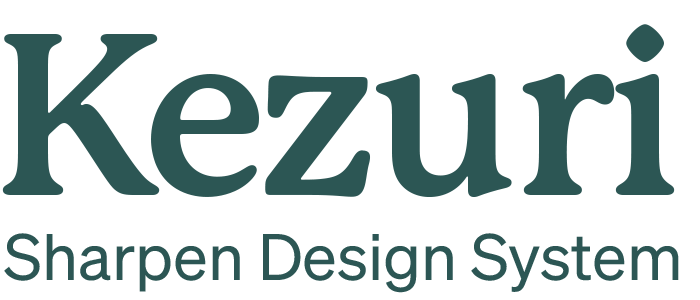
<style>
.page{position:relative;width:700px;height:300px;background:#ffffff}
.page>*{position:absolute;margin:0}
.t1{font:226px "P22MackinacPro-Bold";letter-spacing:-0.025em;color:#2c5654}
.t2{font:64px "Sohne-Buch";color:#2c5654}
</style>
<div class="page">
<p class="t1" style="left:2px;top:24px;width:673px;height:173px">Kezuri</p>
<p class="t2" style="left:4px;top:233px;width:675px;height:60px">Sharpen Design System</p>
</div>
